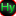
<style>
.page{position:relative;width:16px;height:16px}
.page>*{position:absolute;margin:0}
.t1{font:13.3px "Latha"}
</style>
<div class="page">
<p class="t1" style="left:1px;top:3px;width:14px;height:10px">Hy</p>
</div>
